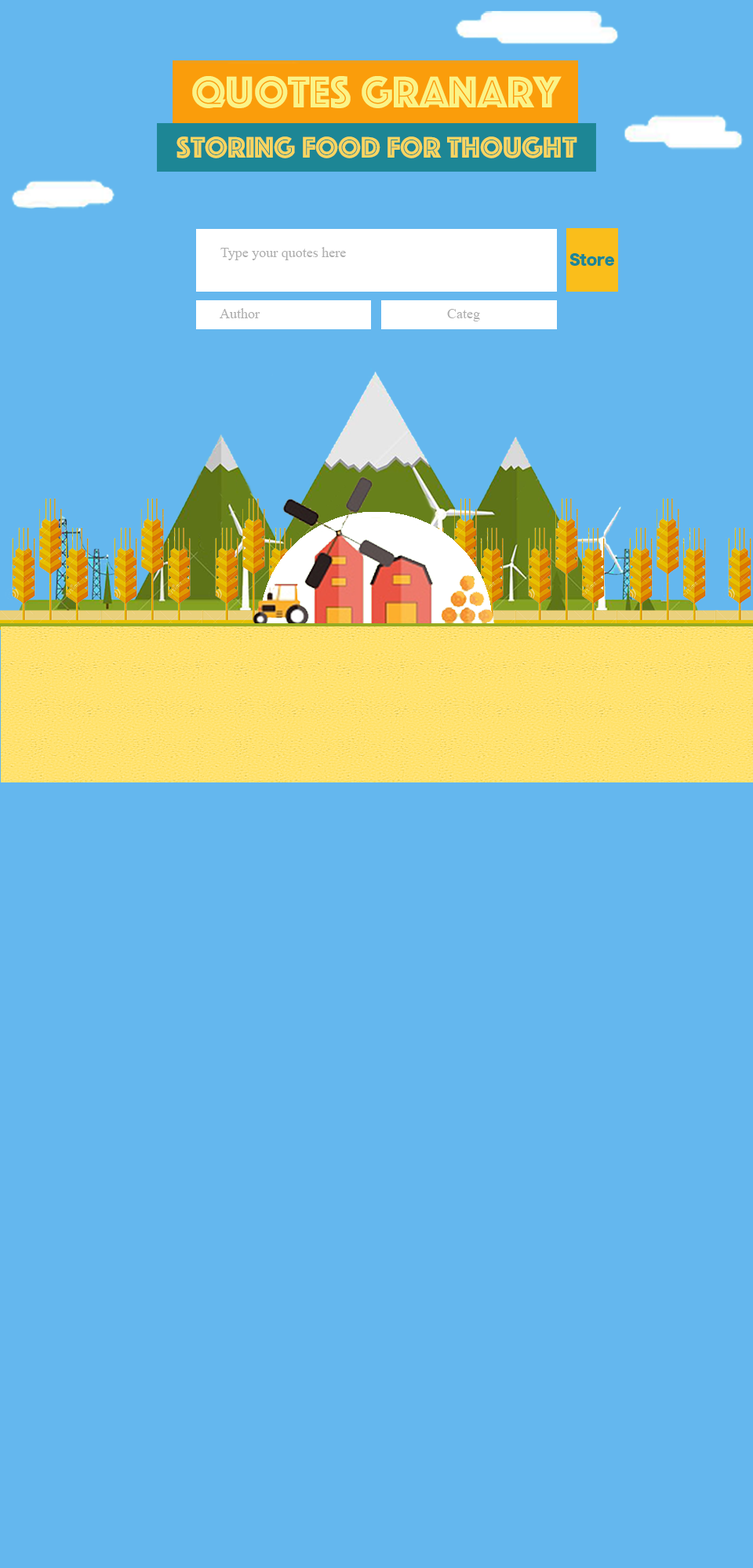
<style>
.page{position:relative;width:753px;height:1568px;background:#64b7ee}
.page>*{position:absolute;margin:0}
.t1{font:46.1px "Phosphate-Inline";color:#faf387}
.t2{font:30.7px "Phosphate-Inline";color:#fbd560}
.t3{font:14.1px "TimesNewRomanPSMT";color:#afafaf}
.t4{font:14.1px "HiraKakuStd-W8";color:#1d8695}
</style>
<div class="page">
<p class="t1" style="left:192px;top:76px;width:369px;height:32px">Quotes Granary</p>
<p class="t2" style="left:176px;top:136px;width:401px;height:22px">storing food for thought</p>
<p class="t3" style="left:220px;top:247px;width:126px;height:13px">Type your quotes here</p>
<p class="t4" style="left:569px;top:253px;width:45px;height:13px">Store</p>
<p class="t3" style="left:220px;top:308px;width:40px;height:10px">Author</p>
<p class="t3" style="left:447px;top:309px;width:33px;height:12px">Categ</p>
</div>
